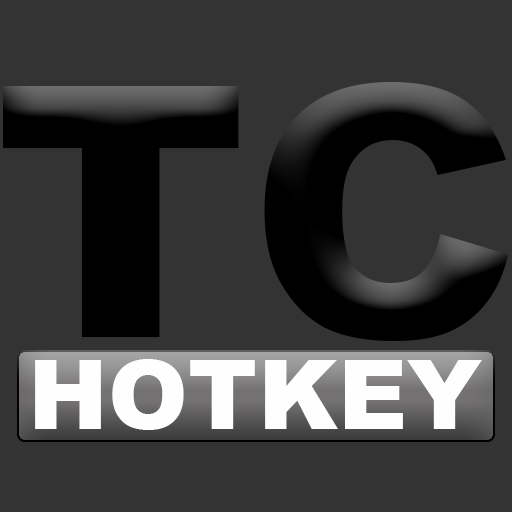
<style>
.page{position:relative;width:512px;height:512px;background:#333333}
.page>*{position:absolute;margin:0}
.t1{font:350px "Arial-Black";color:#000000}
.t2{font:96.2px "Arial-Black";color:#fefefe}
</style>
<div class="page">
<p class="t1" style="left:3px;top:82px;width:506px;height:259px">TC</p>
<p class="t2" style="left:35px;top:359px;width:447px;height:71px">HOTKEY</p>
</div>
